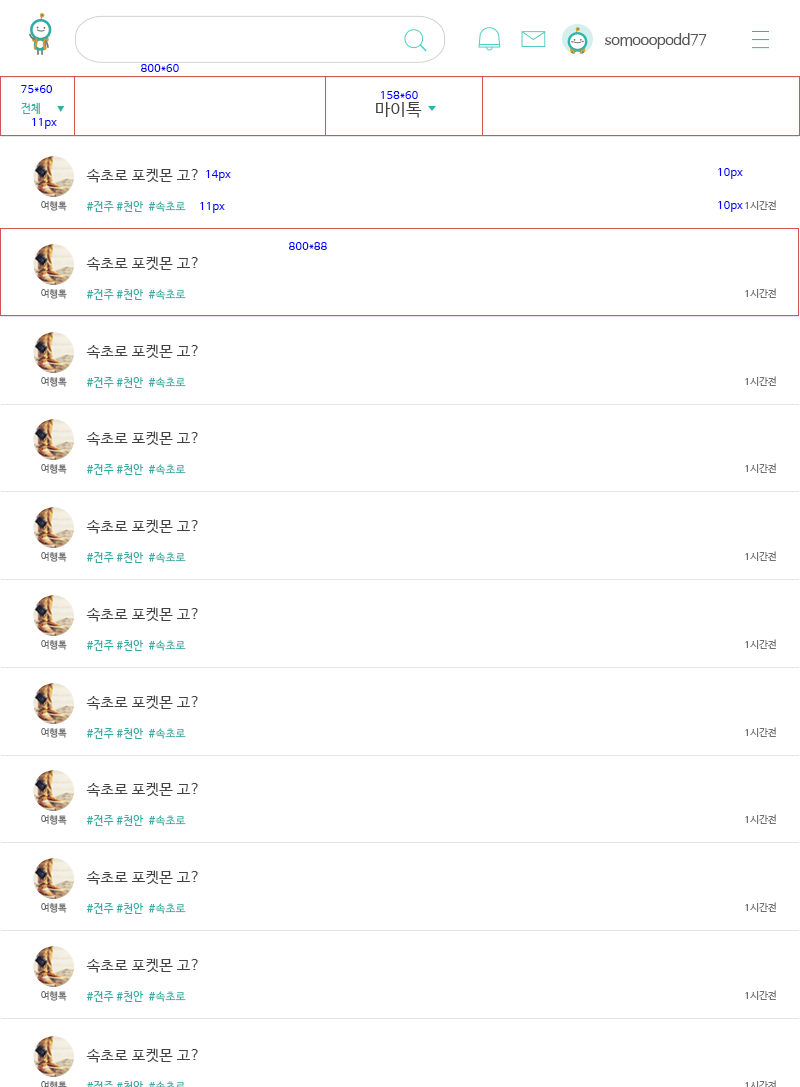
<style>
.page{position:relative;width:800px;height:1087px;background:#ffffff}
.page>*{position:absolute;margin:0}
.t1{font:14.8px "NanumBarunGothic";letter-spacing:-0.025em;color:#58595b}
.t2{font:11px "NanumBarunGothic";letter-spacing:0.025em;color:#0000ff}
.t3{font:17px "NanumBarunGothic";letter-spacing:0.025em;color:#434343}
.t4{font:11px "NanumBarunGothic";letter-spacing:0.025em;color:#36ada4}
.t5{font:15px "NanumBarunGothic";letter-spacing:0.025em;color:#434343}
.t6{font:9.6px "NanumBarunGothic";letter-spacing:0.025em;color:#707070}
</style>
<div class="page">
<p class="t1" style="left:605px;top:33px;width:102px;height:16px">somooopodd77</p>
<p class="t2" style="left:141px;top:64px;width:38px;height:8px">800*60</p>
<p class="t2" style="left:21px;top:85px;width:32px;height:8px">75*60</p>
<p class="t3" style="left:376px;top:102px;width:46px;height:16px">마이톡</p>
<p class="t2" style="left:381px;top:91px;width:37px;height:8px">158*60</p>
<p class="t4" style="left:21px;top:103px;width:19px;height:11px">전체</p>
<p class="t2" style="left:32px;top:118px;width:25px;height:11px">11px</p>
<p class="t5" style="left:86px;top:168px;width:112px;height:15px">속초로 포켓몬 고?</p>
<p class="t2" style="left:206px;top:170px;width:25px;height:11px">14px</p>
<p class="t2" style="left:718px;top:168px;width:25px;height:11px">10px</p>
<p class="t6" style="left:41px;top:201px;width:26px;height:10px">여행톡</p>
<p class="t4" style="left:86px;top:201px;width:100px;height:11px">#전주 #천안  #속초로</p>
<p class="t2" style="left:200px;top:202px;width:25px;height:11px">11px</p>
<p class="t2" style="left:718px;top:201px;width:25px;height:11px">10px</p>
<p class="t6" style="left:745px;top:200px;width:31px;height:10px">1시간전</p>
<p class="t2" style="left:289px;top:242px;width:38px;height:8px">800*88</p>
<p class="t5" style="left:86px;top:256px;width:112px;height:15px">속초로 포켓몬 고?</p>
<p class="t6" style="left:41px;top:289px;width:26px;height:10px">여행톡</p>
<p class="t4" style="left:86px;top:289px;width:100px;height:11px">#전주 #천안  #속초로</p>
<p class="t6" style="left:745px;top:288px;width:31px;height:10px">1시간전</p>
<p class="t5" style="left:86px;top:344px;width:112px;height:15px">속초로 포켓몬 고?</p>
<p class="t6" style="left:41px;top:377px;width:26px;height:10px">여행톡</p>
<p class="t4" style="left:86px;top:377px;width:100px;height:11px">#전주 #천안  #속초로</p>
<p class="t6" style="left:745px;top:376px;width:31px;height:10px">1시간전</p>
<p class="t5" style="left:86px;top:431px;width:112px;height:15px">속초로 포켓몬 고?</p>
<p class="t6" style="left:41px;top:464px;width:26px;height:10px">여행톡</p>
<p class="t4" style="left:86px;top:464px;width:100px;height:11px">#전주 #천안  #속초로</p>
<p class="t6" style="left:745px;top:463px;width:31px;height:10px">1시간전</p>
<p class="t5" style="left:86px;top:519px;width:112px;height:15px">속초로 포켓몬 고?</p>
<p class="t6" style="left:41px;top:552px;width:26px;height:10px">여행톡</p>
<p class="t4" style="left:86px;top:552px;width:100px;height:11px">#전주 #천안  #속초로</p>
<p class="t6" style="left:745px;top:551px;width:31px;height:10px">1시간전</p>
<p class="t5" style="left:86px;top:607px;width:112px;height:15px">속초로 포켓몬 고?</p>
<p class="t6" style="left:41px;top:640px;width:26px;height:10px">여행톡</p>
<p class="t4" style="left:86px;top:640px;width:100px;height:11px">#전주 #천안  #속초로</p>
<p class="t6" style="left:745px;top:639px;width:31px;height:10px">1시간전</p>
<p class="t5" style="left:86px;top:695px;width:112px;height:15px">속초로 포켓몬 고?</p>
<p class="t6" style="left:41px;top:728px;width:26px;height:10px">여행톡</p>
<p class="t4" style="left:86px;top:728px;width:100px;height:11px">#전주 #천안  #속초로</p>
<p class="t6" style="left:745px;top:727px;width:31px;height:10px">1시간전</p>
<p class="t5" style="left:86px;top:782px;width:112px;height:15px">속초로 포켓몬 고?</p>
<p class="t6" style="left:41px;top:815px;width:26px;height:10px">여행톡</p>
<p class="t4" style="left:86px;top:815px;width:100px;height:11px">#전주 #천안  #속초로</p>
<p class="t6" style="left:745px;top:814px;width:31px;height:10px">1시간전</p>
<p class="t5" style="left:86px;top:870px;width:112px;height:15px">속초로 포켓몬 고?</p>
<p class="t6" style="left:41px;top:903px;width:26px;height:10px">여행톡</p>
<p class="t4" style="left:86px;top:903px;width:100px;height:11px">#전주 #천안  #속초로</p>
<p class="t6" style="left:745px;top:902px;width:31px;height:10px">1시간전</p>
<p class="t5" style="left:86px;top:958px;width:112px;height:15px">속초로 포켓몬 고?</p>
<p class="t6" style="left:745px;top:990px;width:31px;height:10px">1시간전</p>
<p class="t6" style="left:41px;top:991px;width:26px;height:10px">여행톡</p>
<p class="t4" style="left:86px;top:991px;width:100px;height:11px">#전주 #천안  #속초로</p>
<p class="t5" style="left:86px;top:1048px;width:112px;height:15px">속초로 포켓몬 고?</p>
</div>
